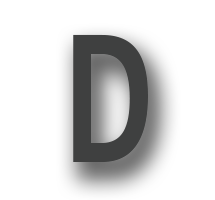
<style>
.page{position:relative;width:215px;height:200px;background:#ffffff}
.page>*{position:absolute;margin:0}
.t1{font:180.6px "KohinoorBangla-Semibold";color:#3f4040;scale:0.78 1}
</style>
<div class="page">
<p class="t1" style="left:73px;top:34px;width:75px;height:128px">D</p>
</div>
